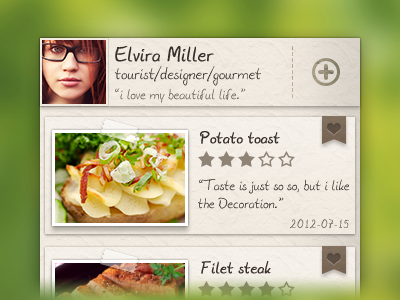
<style>
.page{position:relative;width:400px;height:300px}
.page>*{position:absolute;margin:0}
.t1{font:20px "Julius-BThyssen";color:#362e2b;font-weight:bold}
.t2{font:16px "Julius-BThyssen";color:#362e2b}
.t3{font:14px "Julius-BThyssen"}
.t4{font:16px "Julius-BThyssen";color:#362e2b;font-weight:bold}
.t5{font:14px/18px "Julius-BThyssen"}
.t6{font:12px "Julius-BThyssen";letter-spacing:0.1em}
</style>
<div class="page">
<p class="t1" style="left:115px;top:46px;width:99px;height:16px">Elvira Miller</p>
<p class="t2" style="left:115px;top:66px;width:146px;height:20px">tourist/designer/gourmet</p>
<p class="t3" style="left:115px;top:88px;width:131px;height:15px">“i love my beautiful life.”</p>
<p class="t4" style="left:200px;top:131px;width:80px;height:13px">Potato toast</p>
<p class="t5" style="left:198px;top:179px;width:152px;height:30px">“Taste is just so so, but i like<br>the Decoration.”</p>
<p class="t6" style="left:290px;top:218px;width:59px;height:11px">2012-07-15</p>
<p class="t4" style="left:201px;top:261px;width:70px;height:13px">Filet steak</p>
</div>
